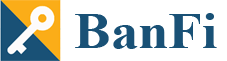
<style>
.page{position:relative;width:227px;height:61px;background:#ffffff}
.page>*{position:absolute;margin:0}
.t1{font:50.7px "TimesNewRomanPS-BoldMT";color:#195176;scale:1.08 1}
</style>
<div class="page">
<p class="t1" style="left:75px;top:13px;width:142px;height:36px">BanFi</p>
</div>
